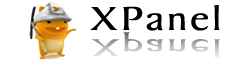
<style>
.page{position:relative;width:250px;height:62px;background:#ffffff}
.page>*{position:absolute;margin:0}
.t1{font:35.4px "BakerSignetBT-Roman";letter-spacing:0.05em;color:#000000;font-weight:bold;scale:1.26 1}
.t2{font:25.4px "BakerSignetBT-Roman";letter-spacing:0.05em;font-weight:bold;scale:1.75 1}
</style>
<div class="page">
<p class="t1" style="left:90px;top:5px;width:130px;height:26px">XPanel</p>
<p class="t2" style="left:92px;top:32px;width:128px;height:26px">Xpanel</p>
</div>
